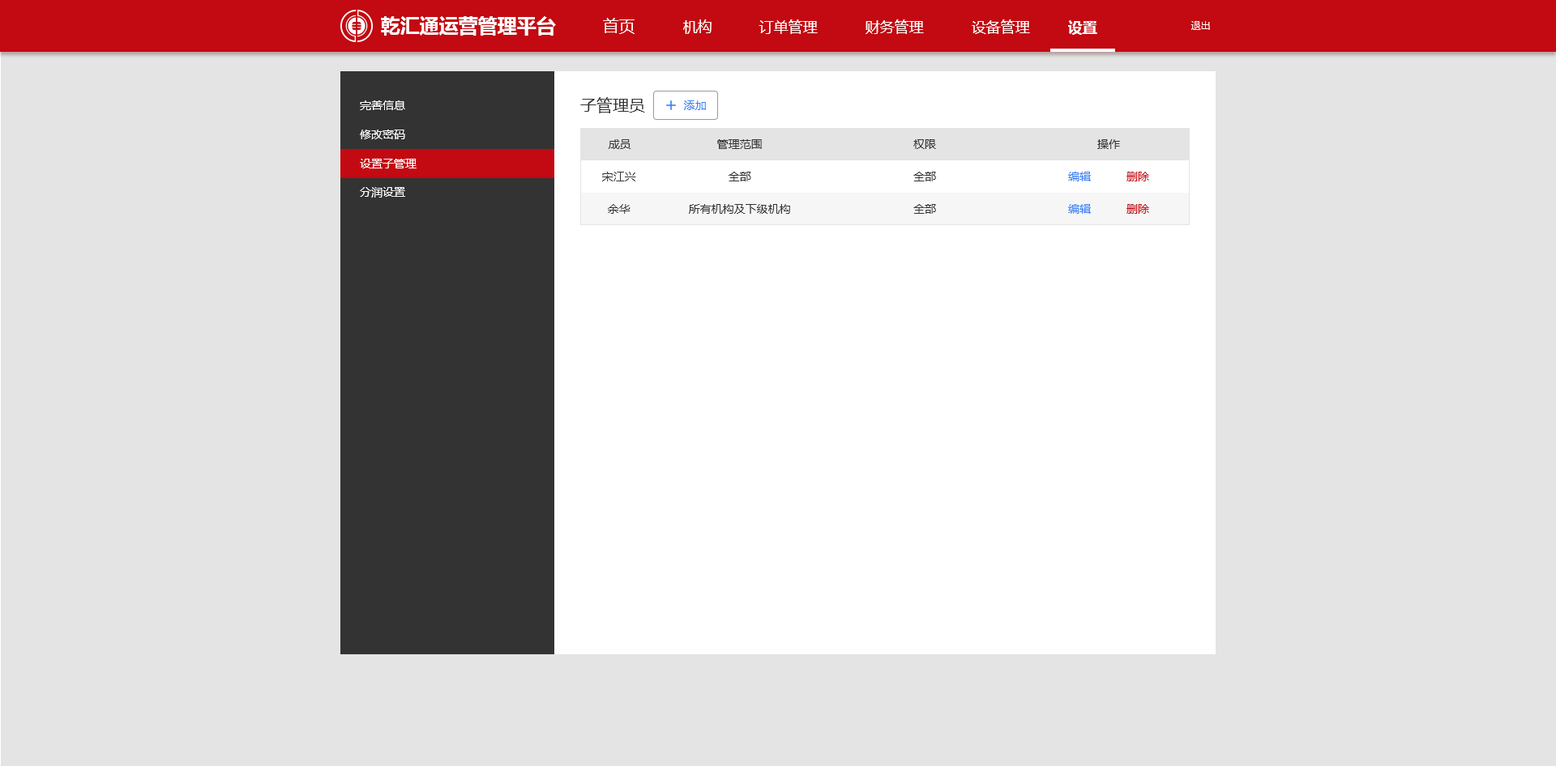
<style>
.page{position:relative;width:1556px;height:766px;background:#e4e4e4}
.page>*{position:absolute;margin:0}
.t1{font:19.4px "MicrosoftYaHei-Bold";color:#ffffff}
.t2{font:16.2px "MicrosoftYaHei";color:#ffffff}
.t3{font:14.6px "MicrosoftYaHei";color:#ffffff}
.t4{font:14.6px "MicrosoftYaHei-Bold";color:#ffffff}
.t5{font:9.7px "MicrosoftYaHei";color:#ffffff}
.t6{font:11.3px "MicrosoftYaHei";color:#ffffff}
.t7{font:16.2px "MicrosoftYaHei";color:#333333}
.t8{font:11.3px "MicrosoftYaHei";color:#3880f6}
.t9{font:11.3px "MicrosoftYaHei";color:#333333}
.t10{font:11.3px "MicrosoftYaHei";color:#c30911}
</style>
<div class="page">
<p class="t1" style="left:381px;top:16px;width:175px;height:20px">乾汇通运营管理平台</p>
<p class="t2" style="left:603px;top:18px;width:31px;height:16px">首页</p>
<p class="t3" style="left:683px;top:19px;width:28px;height:15px">机构</p>
<p class="t3" style="left:758px;top:19px;width:60px;height:15px">订单管理</p>
<p class="t3" style="left:865px;top:19px;width:59px;height:15px">财务管理</p>
<p class="t3" style="left:971px;top:19px;width:59px;height:15px">设备管理</p>
<p class="t4" style="left:1068px;top:20px;width:29px;height:15px">设置</p>
<p class="t5" style="left:1190px;top:21px;width:20px;height:9px">退出</p>
<p class="t6" style="left:360px;top:100px;width:45px;height:10px">完善信息</p>
<p class="t7" style="left:580px;top:97px;width:65px;height:16px">子管理员</p>
<p class="t8" style="left:684px;top:100px;width:22px;height:10px">添加</p>
<p class="t6" style="left:360px;top:130px;width:45px;height:9px">修改密码</p>
<p class="t9" style="left:608px;top:139px;width:23px;height:10px">成员</p>
<p class="t9" style="left:717px;top:139px;width:45px;height:10px">管理范围</p>
<p class="t9" style="left:913px;top:139px;width:23px;height:10px">权限</p>
<p class="t9" style="left:1097px;top:139px;width:23px;height:10px">操作</p>
<p class="t6" style="left:360px;top:159px;width:56px;height:10px">设置子管理</p>
<p class="t9" style="left:602px;top:172px;width:34px;height:9px">宋江兴</p>
<p class="t9" style="left:728px;top:172px;width:23px;height:9px">全部</p>
<p class="t9" style="left:913px;top:172px;width:23px;height:9px">全部</p>
<p class="t8" style="left:1068px;top:172px;width:23px;height:9px">编辑</p>
<p class="t10" style="left:1126px;top:172px;width:23px;height:9px">删除</p>
<p class="t6" style="left:360px;top:187px;width:45px;height:11px">分润设置</p>
<p class="t9" style="left:608px;top:204px;width:22px;height:10px">余华</p>
<p class="t9" style="left:689px;top:204px;width:101px;height:10px">所有机构及下级机构</p>
<p class="t9" style="left:913px;top:204px;width:23px;height:10px">全部</p>
<p class="t8" style="left:1068px;top:204px;width:23px;height:10px">编辑</p>
<p class="t10" style="left:1126px;top:204px;width:23px;height:10px">删除</p>
</div>
